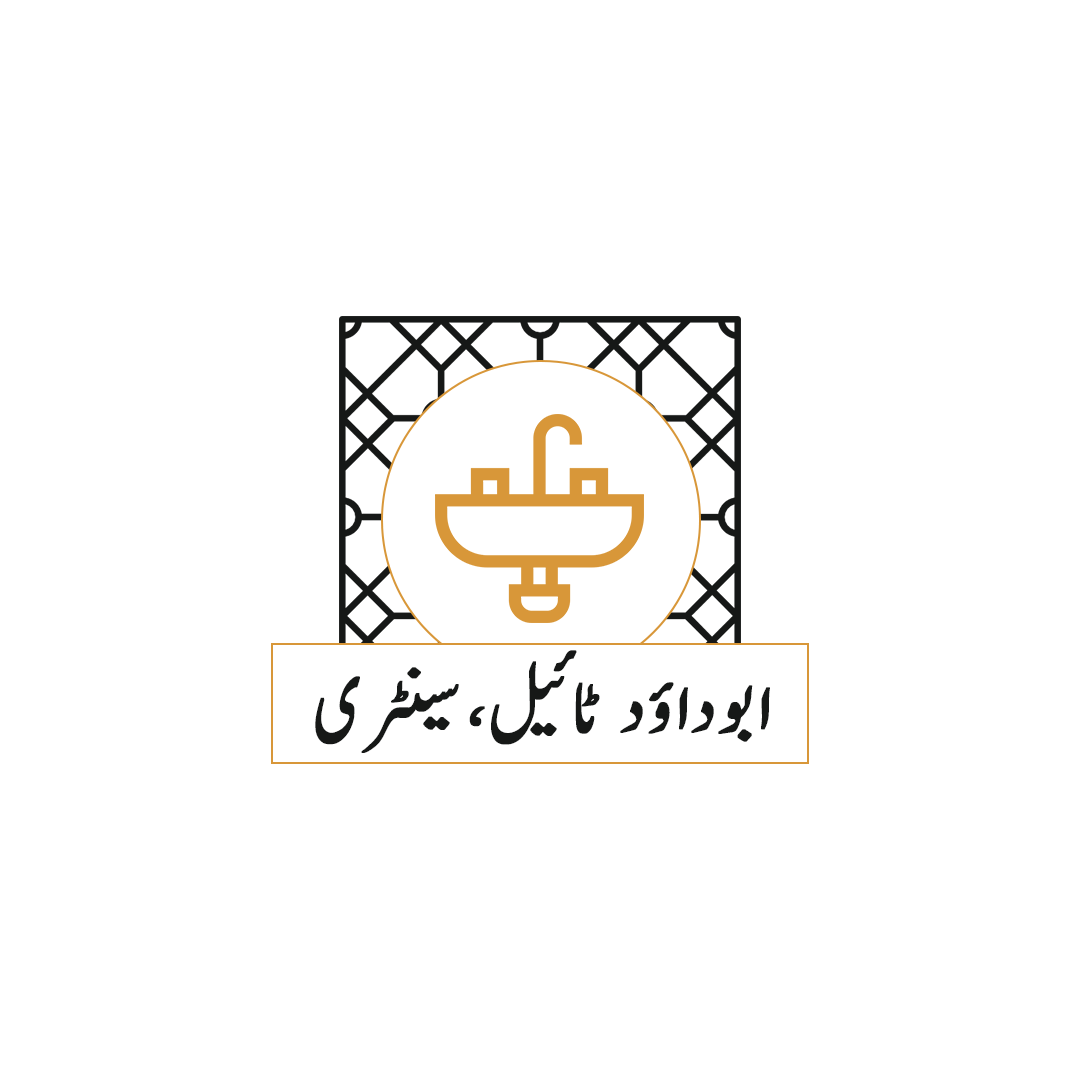
<style>
.page{position:relative;width:1080px;height:1080px;background:#ffffff}
.page>*{position:absolute;margin:0}
.t1{font:85px "Jameel-Noori-Nastaleeq";color:#161817;font-weight:bold}
</style>
<div class="page">
<p class="t1" style="left:315px;top:650px;width:455px;height:103px">ابوداؤد ٹائیل،سینٹری</p>
</div>
